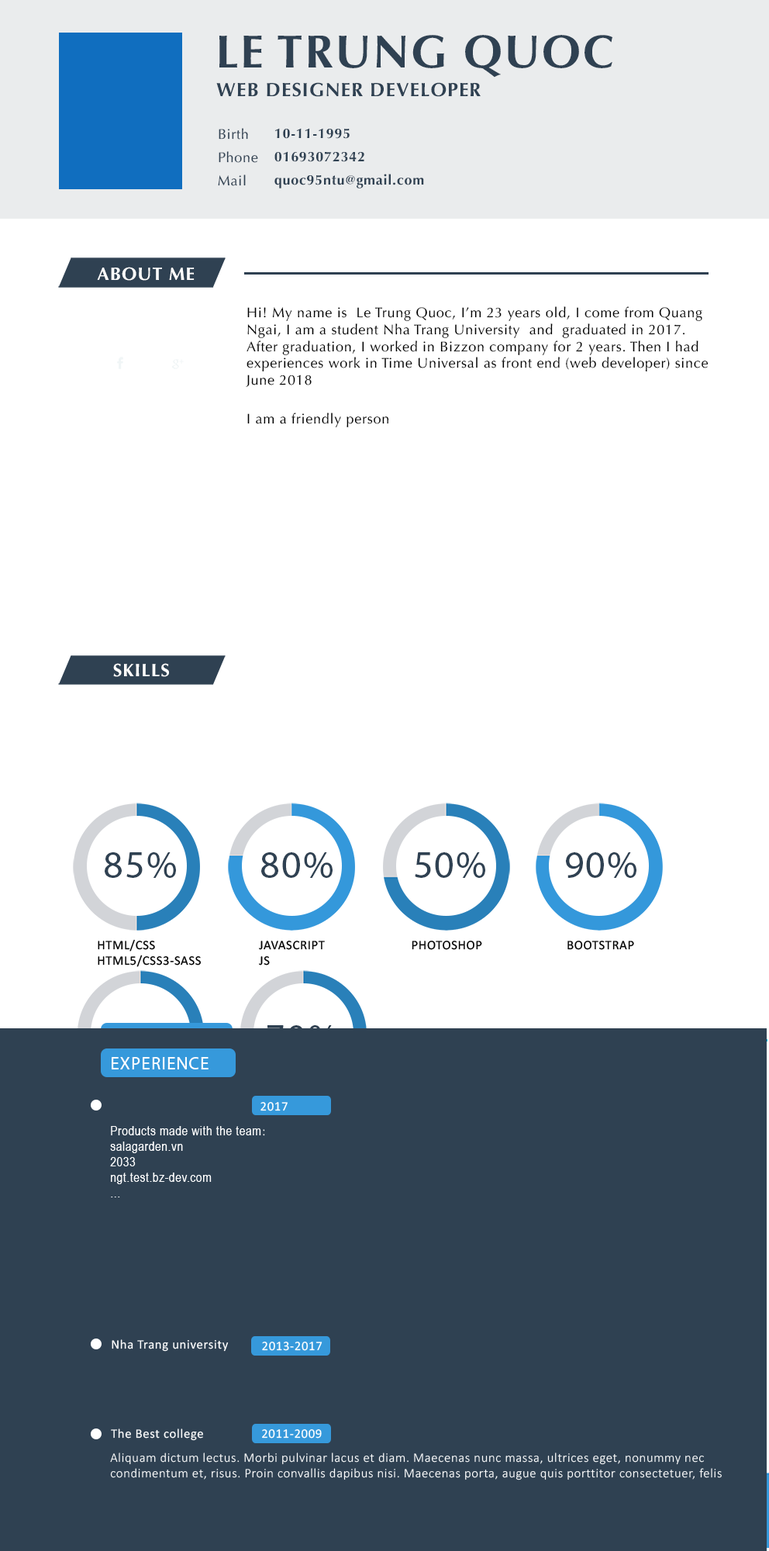
<style>
.page{position:relative;width:769px;height:1551px;background:#ffffff}
.page>*{position:absolute;margin:0}
.t1{font:46.5px "Optima-Bold";letter-spacing:0.04em;color:#2f4152}
.t2{font:19.3px "Optima-Bold";letter-spacing:0.04em;color:#2f4152}
.t3{font:14px/23.3px "Optima-Regular";letter-spacing:0.04em;color:#2f4152}
.t4{font:14px/23.3px "Optima-Bold";letter-spacing:0.04em;color:#2f4152}
.t5{font:18.1px "Optima-Bold";letter-spacing:0.04em;color:#ffffff}
.t6{font:14px "Optima-Regular";letter-spacing:0.04em;color:#000000}
.t7{font:38.8px "MyriadPro-Regular";letter-spacing:0.04em;color:#2f4152}
.t8{font:12.9px "Calibri";letter-spacing:0.04em;color:#000000}
.t9{font:18.1px "MyriadPro-Regular";letter-spacing:0.04em;color:#ffffff}
.t10{font:12.9px "Calibri";letter-spacing:0.04em;color:#ffffff}
.t11{font:12.9px "ArialNarrow";letter-spacing:0.04em;color:#ffffff}
.t12{font:12.9px "Calibri-Light";letter-spacing:0.04em;color:#ffffff}
</style>
<div class="page">
<p class="t1" style="left:219px;top:35px;width:394px;height:43px">LE TRUNG QUOC</p>
<p class="t2" style="left:216px;top:82px;width:265px;height:15px">WEB DESIGNER DEVELOPER</p>
<p class="t3" style="left:218px;top:128px;width:40px;height:58px;text-align:right">Birth<br>Phone<br>Mail</p>
<p class="t4" style="left:274px;top:128px;width:150px;height:60px;text-align:right">10-11-1995<br>01693072342<br>quoc95ntu@gmail.com</p>
<p class="t5" style="left:97px;top:267px;width:98px;height:14px">ABOUT ME</p>
<p class="t6" style="left:246px;top:306px;width:463px;height:81px;text-align:right">Hi! My name is  Le Trung Quoc, I’m 23 years old, I come from Quang Ngai, I am a student Nha Trang University  and  graduated in 2017. After graduation, I worked in Bizzon company for 2 years. Then I had experiences work in Time Universal as front end (web developer) since June 2018</p>
<p class="t6" style="left:247px;top:412px;width:142px;height:15px">I am a friendly person</p>
<p class="t5" style="left:113px;top:663px;width:56px;height:14px">SKILLS</p>
<p class="t7" style="left:105px;top:852px;width:71px;height:26px">85%</p>
<p class="t7" style="left:261px;top:852px;width:72px;height:26px">80%</p>
<p class="t7" style="left:415px;top:852px;width:70px;height:26px">50%</p>
<p class="t7" style="left:566px;top:852px;width:70px;height:26px">90%</p>
<p class="t8" style="left:98px;top:939px;width:103px;height:28px;text-align:right">HTML/CSS<br>HTML5/CSS3-SASS</p>
<p class="t8" style="left:259px;top:940px;width:66px;height:25px;text-align:right">JAVASCRIPT<br>JS</p>
<p class="t8" style="left:412px;top:940px;width:70px;height:10px">PHOTOSHOP</p>
<p class="t8" style="left:567px;top:940px;width:67px;height:10px">BOOTSTRAP</p>
<p class="t9" style="left:112px;top:1057px;width:97px;height:12px">EXPERIENCE</p>
<p class="t10" style="left:260px;top:1102px;width:28px;height:9px">2017</p>
<p class="t11" style="left:110px;top:1126px;width:155px;height:71px;text-align:right"><span class="t12">:</span>Products made with the team <br>salagarden.vn<br>2033<br>ngt.test.bz-dev.com<br>...</p>
<p class="t10" style="left:112px;top:1339px;width:117px;height:12px">Nha Trang university</p>
<p class="t10" style="left:262px;top:1341px;width:61px;height:9px">2013-2017</p>
<p class="t10" style="left:111px;top:1428px;width:92px;height:12px">The Best college</p>
<p class="t10" style="left:262px;top:1429px;width:60px;height:9px">2011-2009</p>
<p class="t12" style="left:110px;top:1452px;width:612px;height:28px;text-align:right">Aliquam dictum lectus. Morbi pulvinar lacus et diam. Maecenas nunc massa, ultrices eget, nonummy nec<br> condimentum et, risus. Proin convallis dapibus nisi. Maecenas porta, augue quis porttitor consectetuer, felis</p>
</div>
